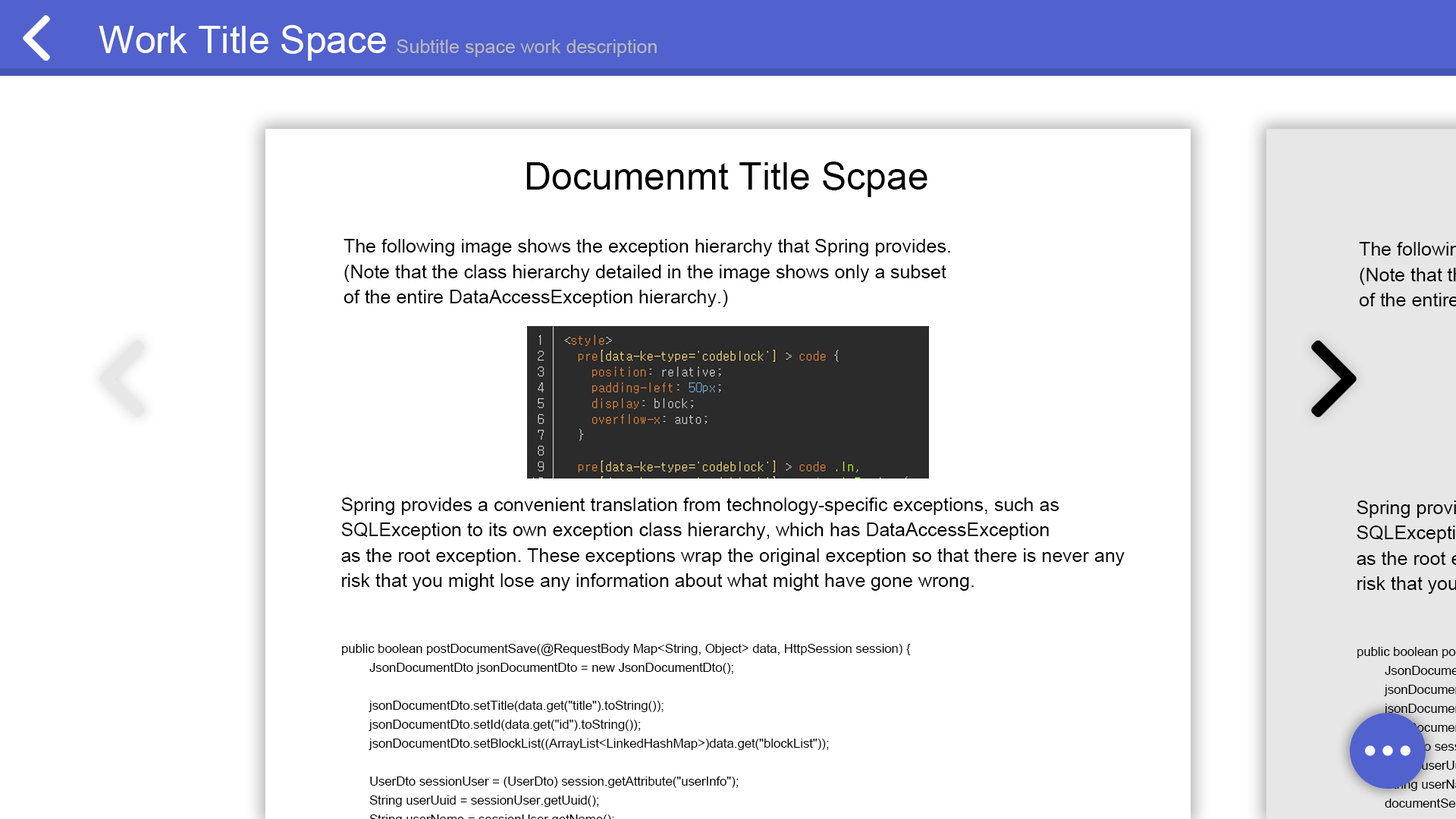
<style>
.page{position:relative;width:1456px;height:819px;background:#ffffff}
.page>*{position:absolute;margin:0}
.t1{font:37.9px "ArialMT";color:#ffffff}
.t2{font:19px "ArialMT";color:#b8b8b8}
.t3{font:9.1px "ArialMT";color:#000000}
.t4{font:19px/25.3px "ArialMT";color:#000000}
</style>
<div class="page">
<p class="t1" style="left:99px;top:25px;width:287px;height:36px">Work Title Space</p>
<p class="t2" style="left:397px;top:39px;width:260px;height:18px">Subtitle space work description</p>
<p class="t3" style="left:526px;top:162px;width:401px;height:35px">Documenmt Title Scpae</p>
<p class="t4" style="left:344px;top:239px;width:606px;height:68px">The following image shows the exception hierarchy that Spring provides. <br>(Note that the class hierarchy detailed in the image shows only a subset <br>of the entire DataAccessException hierarchy.)</p>
<p class="t4" style="left:341px;top:497px;width:784px;height:94px">Spring provides a convenient translation from technology-specific exceptions, such as <br>SQLException to its own exception class hierarchy, which has DataAccessException <br>as the root exception. These exceptions wrap the original exception so that there is never any <br>risk that you might lose any information about what might have gone wrong.</p>
</div>
